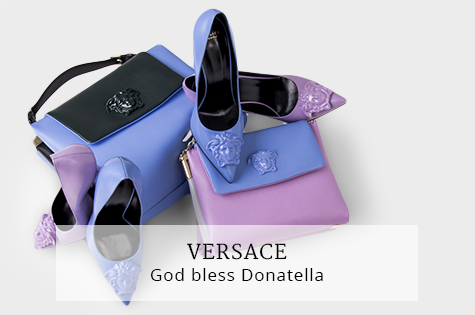
<style>
.page{position:relative;width:475px;height:315px;background:#ececec}
.page>*{position:absolute;margin:0}
.t1{font:20px "Merriweather";letter-spacing:0.05em;color:#000000}
.t2{font:17px "OpenSans";letter-spacing:0.05em;color:#000000}
</style>
<div class="page">
<p class="t1" style="left:187px;top:243px;width:100px;height:17px">VERSACE</p>
<p class="t2" style="left:150px;top:268px;width:173px;height:13px">God bless Donatella</p>
</div>
